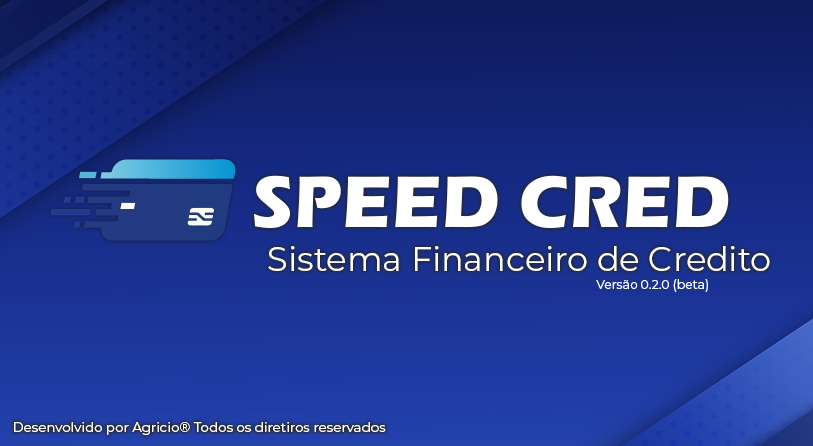
<style>
.page{position:relative;width:813px;height:446px}
.page>*{position:absolute;margin:0}
.t1{font:33.5px "Montserrat-Regular";color:#ffffff}
.t2{font:12.3px "Montserrat-Regular";color:#ffffff}
.t3{font:13.4px "Montserrat-Regular";color:#ffffff}
</style>
<div class="page">
<p class="t1" style="left:268px;top:246px;width:502px;height:25px">Sistema Financeiro de Credito</p>
<p class="t2" style="left:596px;top:279px;width:112px;height:13px">Versão 0.2.0 (beta)</p>
<p class="t3" style="left:14px;top:422px;width:372px;height:13px">Desenvolvido por Agricio® Todos os diretiros reservados</p>
</div>
